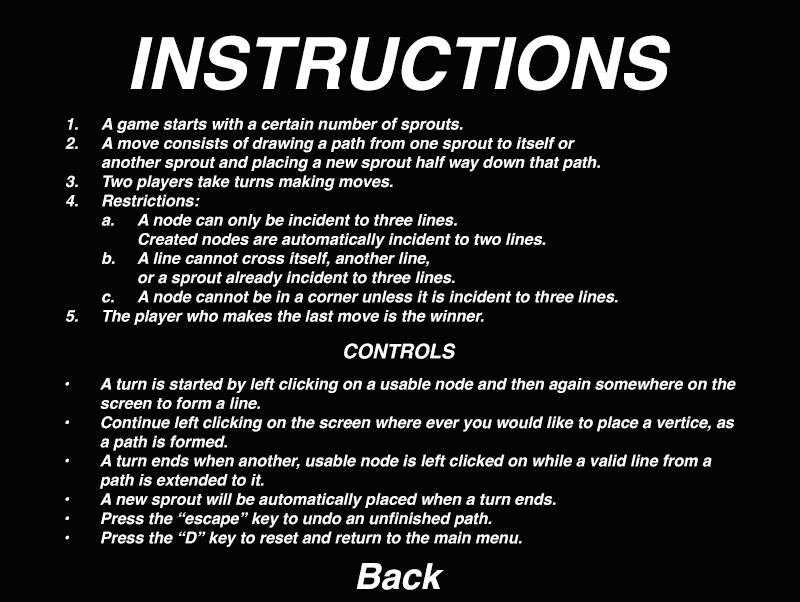
<style>
.page{position:relative;width:800px;height:602px;background:#050404}
.page>*{position:absolute;margin:0}
.t1{font:72px "Helvetica-BoldOblique";color:#feffff}
.t2{font:16px "Helvetica-BoldOblique";color:#feffff}
.t3{font:20px "Helvetica-BoldOblique";color:#feffff}
.t4{font:36px "Helvetica-BoldOblique";color:#ffffff}
</style>
<div class="page">
<p class="t1" style="left:130px;top:35px;width:540px;height:56px">INSTRUCTIONS</p>
<p class="t2" style="left:65px;top:117px;width:553px;height:208px">1. A game starts with a certain number of sprouts.<br>2. A move consists of drawing a path from one sprout to itself or <br> another sprout and placing a new sprout half way down that path. <br>3. Two players take turns making moves.<br>4. Restrictions:<br> a. A node can only be incident to three lines. <br>  Created nodes are automatically incident to two lines.<br> b. A line cannot cross itself, another line, <br>  or a sprout already incident to three lines.<br> c. A node cannot be in a corner unless it is incident to three lines.<br>5. The player who makes the last move is the winner.</p>
<p class="t3" style="left:344px;top:343px;width:112px;height:16px">CONTROLS</p>
<p class="t2" style="left:65px;top:377px;width:671px;height:170px">• A turn is started by left clicking on a usable node and then again somewhere on the<br> screen to form a line.<br>• Continue left clicking on the screen where ever you would like to place a vertice, as <br> a path is formed.<br>• A turn ends when another, usable node is left clicked on while a valid line from a<br> path is extended to it.<br>• A new sprout will be automatically placed when a turn ends.<br>• Press the “escape” key to undo an unfinished path.<br>• Press the “D” key to reset and return to the main menu.</p>
<p class="t4" style="left:356px;top:563px;width:88px;height:27px">Back</p>
</div>
